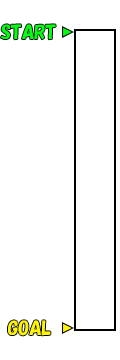
<style>
.page{position:relative;width:120px;height:360px;background:#ffffff}
.page>*{position:absolute;margin:0}
.t1{font:18px "HGPSoeiKakupoptai";color:#00ff12}
.t2{font:18px "HGPSoeiKakupoptai";color:#fff600}
</style>
<div class="page">
<p class="t1" style="left:1px;top:24px;width:55px;height:16px">START</p>
<p class="t2" style="left:8px;top:320px;width:43px;height:16px">GOAL</p>
</div>
